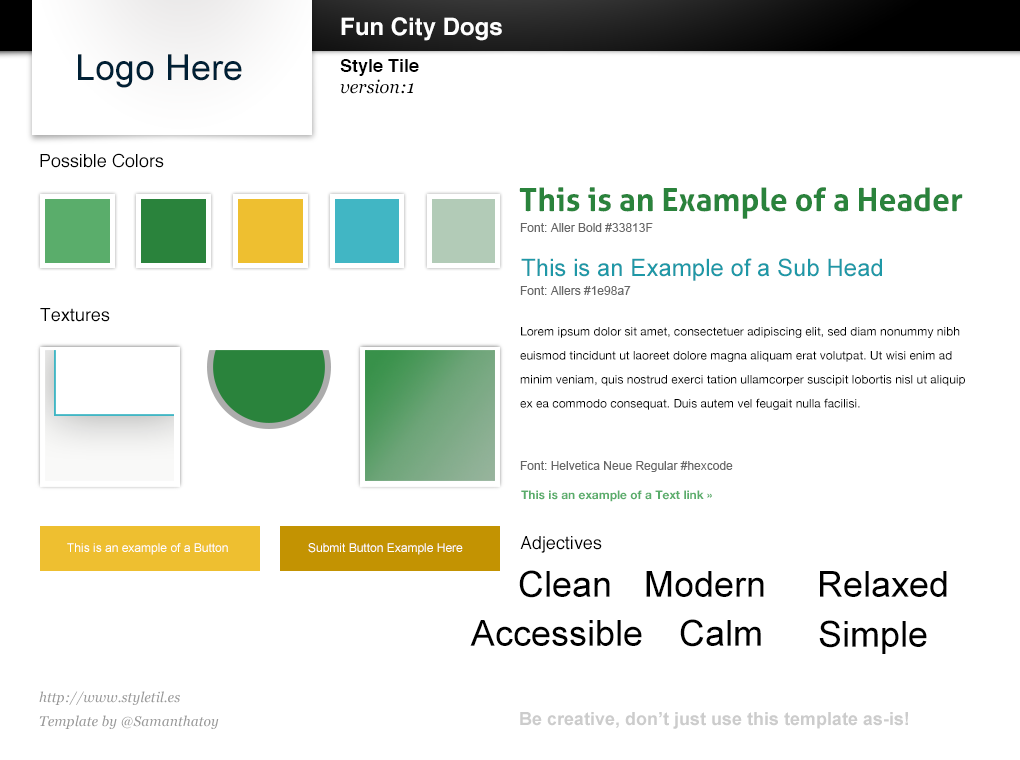
<style>
.page{position:relative;width:1020px;height:760px;background:#ffffff}
.page>*{position:absolute;margin:0}
.t1{font:24px "Helvetica-Bold";color:#ffffff}
.t2{font:36px "ArialMT";color:#002035}
.t3{font:18px "Helvetica-Bold";color:#000000}
.t4{font:18px "Georgia-Italic";color:#000000}
.t5{font:18px "Helvetica";color:#000000}
.t6{font:32px "Aller-Bold";color:#2a833c}
.t7{font:12px "ArialMT";color:#666666}
.t8{font:24px "ArialMT";color:#1e98a7}
.t9{font:12px/24px "HelveticaNeue";color:#000000}
.t10{font:12px "HelveticaNeue-Bold";color:#5aad6b}
.t11{font:12px "ArialMT";color:#ffffff}
.t12{font:36px "ArialMT";color:#000000}
.t13{font:14px/24px "Georgia-Italic";color:#999999}
.t14{font:18px "Arial-BoldMT";color:#cccccc}
</style>
<div class="page">
<p class="t1" style="left:341px;top:17px;width:161px;height:24px">Fun City Dogs</p>
<p class="t2" style="left:78px;top:54px;width:164px;height:34px">Logo Here</p>
<p class="t3" style="left:340px;top:59px;width:79px;height:17px">Style Tile</p>
<p class="t4" style="left:340px;top:79px;width:74px;height:15px">version:1</p>
<p class="t5" style="left:40px;top:153px;width:124px;height:15px">Possible Colors</p>
<p class="t6" style="left:519px;top:187px;width:444px;height:32px">This is an Example of a Header</p>
<p class="t7" style="left:520px;top:223px;width:133px;height:9px">Font: Aller Bold #33813F</p>
<p class="t8" style="left:521px;top:258px;width:361px;height:23px">This is an Example of a Sub Head</p>
<p class="t7" style="left:520px;top:286px;width:111px;height:9px">Font: Allers #1e98a7</p>
<p class="t5" style="left:40px;top:308px;width:70px;height:14px">Textures</p>
<p class="t9" style="left:520px;top:327px;width:445px;height:83px">Lorem ipsum dolor sit amet, consectetuer adipiscing elit, sed diam nonummy nibh euismod tincidunt ut laoreet dolore magna aliquam erat volutpat. Ut wisi enim ad minim veniam, quis nostrud exerci tation ullamcorper suscipit lobortis nisl ut aliquip ex ea commodo consequat. Duis autem vel feugait nulla facilisi.</p>
<p class="t7" style="left:520px;top:461px;width:213px;height:11px">Font: Helvetica Neue Regular #hexcode</p>
<p class="t10" style="left:521px;top:490px;width:191px;height:12px">This is an example of a Text link »</p>
<p class="t11" style="left:67px;top:543px;width:161px;height:12px">This is an example of a Button</p>
<p class="t11" style="left:308px;top:543px;width:155px;height:12px">Submit Button Example Here</p>
<p class="t5" style="left:520px;top:536px;width:82px;height:17px">Adjectives</p>
<p class="t12" style="left:519px;top:570px;width:91px;height:28px">Clean</p>
<p class="t12" style="left:646px;top:571px;width:118px;height:26px">Modern</p>
<p class="t12" style="left:820px;top:571px;width:127px;height:26px">Relaxed</p>
<p class="t12" style="left:470px;top:620px;width:172px;height:26px">Accessible</p>
<p class="t12" style="left:680px;top:619px;width:81px;height:28px">Calm</p>
<p class="t12" style="left:819px;top:620px;width:108px;height:34px">Simple</p>
<p class="t13" style="left:39px;top:691px;width:180px;height:38px">http://www.styletil.es<br>Template by @Samanthatoy</p>
<p class="t14" style="left:520px;top:712px;width:388px;height:17px">Be creative, don’t just use this template as-is!</p>
</div>
